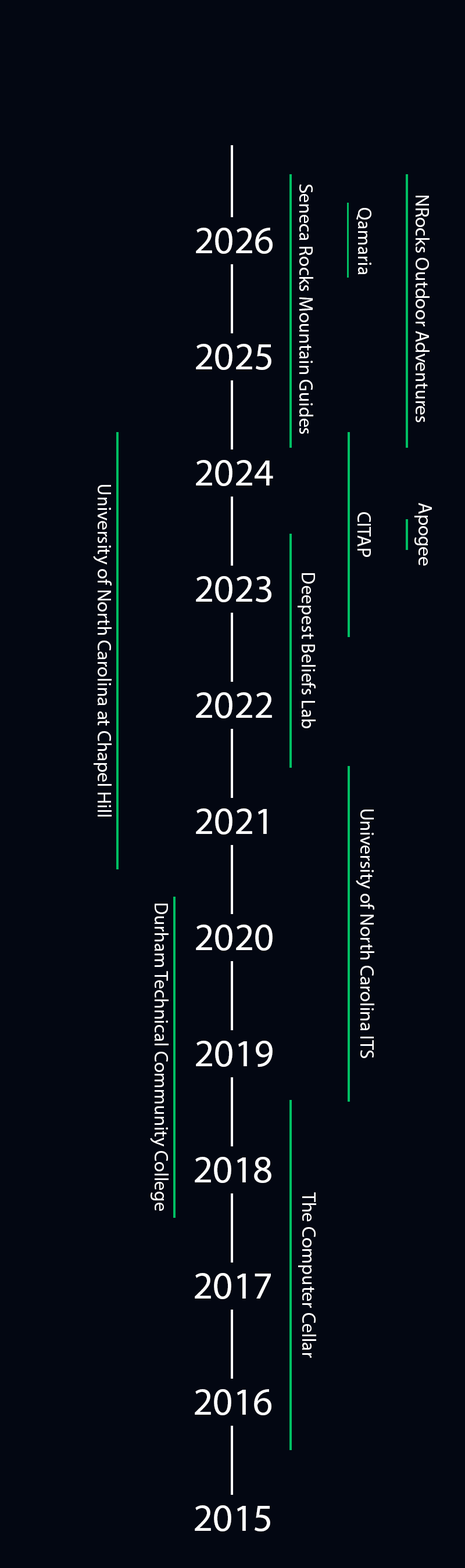
<style>
.page{position:relative;width:465px;height:1568px;background:#030712}
.page>*{position:absolute;margin:0}
.t1{font:19.4px "MyriadPro-Regular";color:#ffffff}
.t2{font:38.7px "MyriadPro-Regular";color:#ffffff}
</style>
<div class="page">
<p class="t1" style="left:299px;top:184px;width:14px;height:250px;rotate:90deg">Seneca Rocks Mountain Guides</p>
<p class="t1" style="left:415px;top:196px;width:14px;height:226px;rotate:90deg">NRocks Outdoor Adventures</p>
<p class="t1" style="left:356px;top:208px;width:15px;height:67px;rotate:90deg">Qamaria</p>
<p class="t2" style="left:196px;top:228px;width:76px;height:26px">2026</p>
<p class="t2" style="left:196px;top:344px;width:75px;height:26px">2025</p>
<p class="t2" style="left:196px;top:460px;width:77px;height:26px">2024</p>
<p class="t1" style="left:93px;top:485px;width:19px;height:332px;rotate:90deg">University of North Carolina at Chapel Hill</p>
<p class="t1" style="left:414px;top:503px;width:17px;height:63px;rotate:90deg">Apogee</p>
<p class="t1" style="left:357px;top:512px;width:14px;height:45px;rotate:90deg">CITAP</p>
<p class="t2" style="left:196px;top:576px;width:75px;height:26px">2023</p>
<p class="t1" style="left:297px;top:573px;width:18px;height:155px;rotate:90deg">Deepest Beliefs Lab</p>
<p class="t2" style="left:196px;top:692px;width:76px;height:26px">2022</p>
<p class="t2" style="left:196px;top:808px;width:71px;height:27px">2021</p>
<p class="t1" style="left:355px;top:810px;width:19px;height:248px;rotate:90deg">University of North Carolina ITS</p>
<p class="t1" style="left:150px;top:904px;width:18px;height:307px;rotate:90deg">Durham Technical Community College</p>
<p class="t2" style="left:196px;top:925px;width:76px;height:26px">2020</p>
<p class="t2" style="left:196px;top:1041px;width:76px;height:26px">2019</p>
<p class="t2" style="left:195px;top:1157px;width:76px;height:26px">2018</p>
<p class="t1" style="left:298px;top:1192px;width:18px;height:166px;rotate:90deg">The Computer Cellar</p>
<p class="t2" style="left:195px;top:1273px;width:76px;height:26px">2017</p>
<p class="t2" style="left:195px;top:1389px;width:76px;height:26px">2016</p>
<p class="t2" style="left:195px;top:1505px;width:75px;height:26px">2015</p>
</div>
